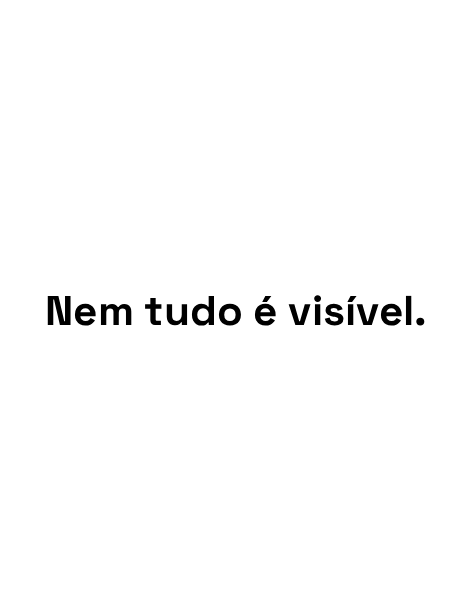
<style>
.page{position:relative;width:472px;height:591px;background:#ffffff}
.page>*{position:absolute;margin:0}
.t1{font:41.6px "SpaceGroteskLight-Bold";color:#000000}
</style>
<div class="page">
<p class="t1" style="left:47px;top:295px;width:378px;height:31px">Nem tudo é visível.</p>
</div>
